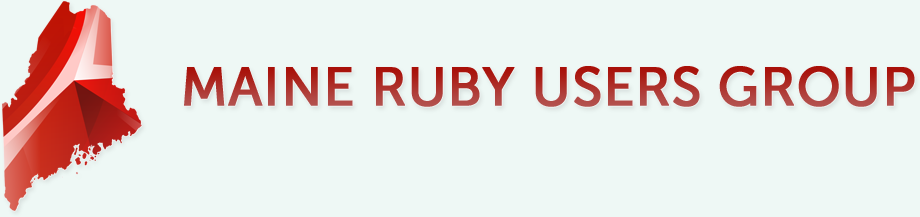
<style>
.page{position:relative;width:920px;height:217px;background:#eef8f5}
.page>*{position:absolute;margin:0}
.t1{font:53.9px "MuseoSans-500";text-transform:uppercase;font-weight:bold}
</style>
<div class="page">
<p class="t1" style="left:184px;top:66px;width:731px;height:41px">Maine Ruby Users Group</p>
</div>
